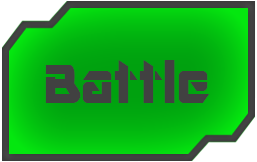
<style>
.page{position:relative;width:257px;height:162px}
.page>*{position:absolute;margin:0}
.t1{font:60px "ARDESTINE";color:#414141}
</style>
<div class="page">
<p class="t1" style="left:45px;top:60px;width:165px;height:43px">Battle</p>
</div>
